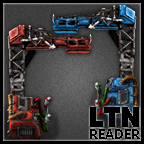
<style>
.page{position:relative;width:144px;height:144px}
.page>*{position:absolute;margin:0}
.t1{font:28px "MADETOMMY-Black";color:#000000;font-variant:small-caps}
.t2{font:19.4px "MADETOMMY-Medium";color:#000000;font-variant:small-caps}
</style>
<div class="page">
<p class="t1" style="left:90px;top:107px;width:49px;height:20px">LTN</p>
<p class="t2" style="left:90px;top:129px;width:50px;height:10px">reader</p>
</div>
